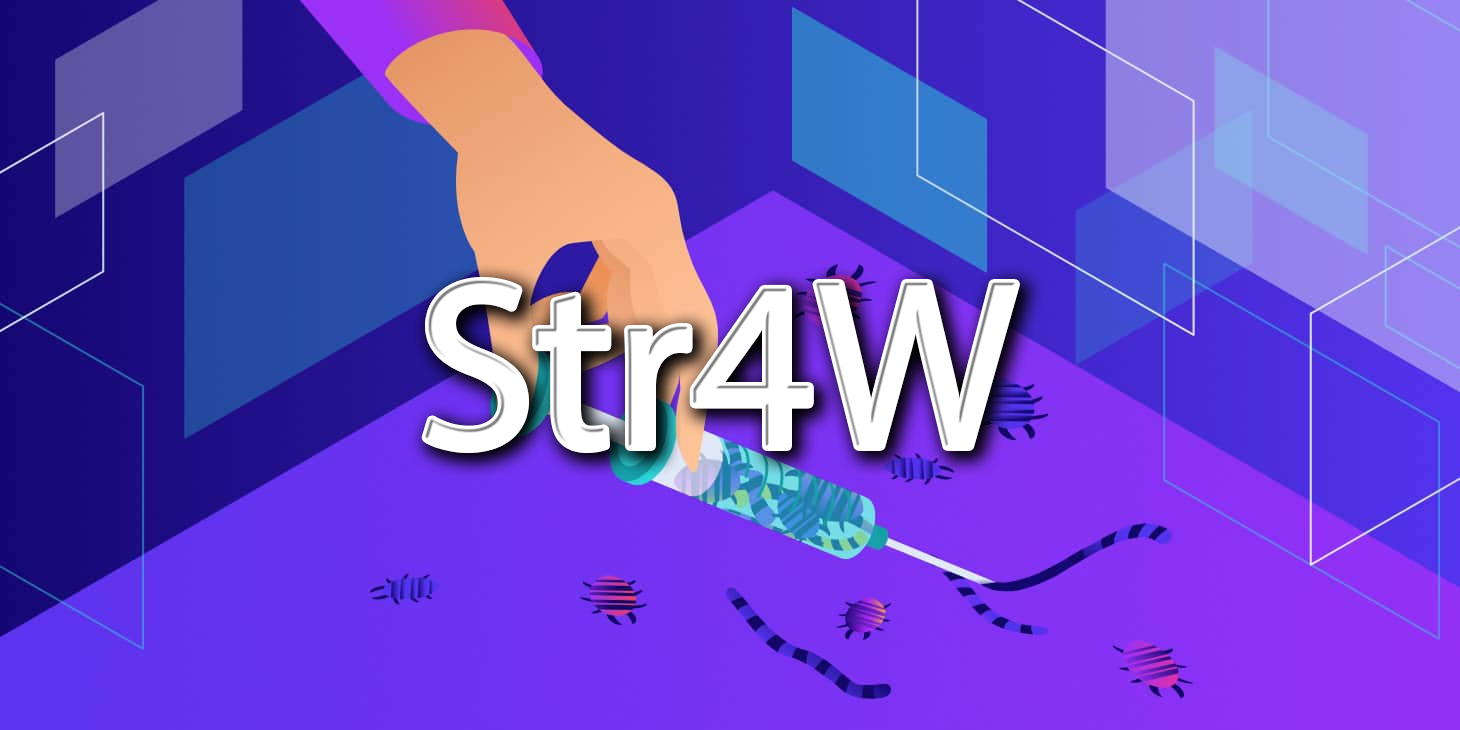
<style>
.page{position:relative;width:1460px;height:730px}
.page>*{position:absolute;margin:0}
.t1{font:240px "MyriadPro-Regular";color:#ffffff}
</style>
<div class="page">
<p class="t1" style="left:426px;top:282px;width:589px;height:166px">Str4W</p>
</div>
